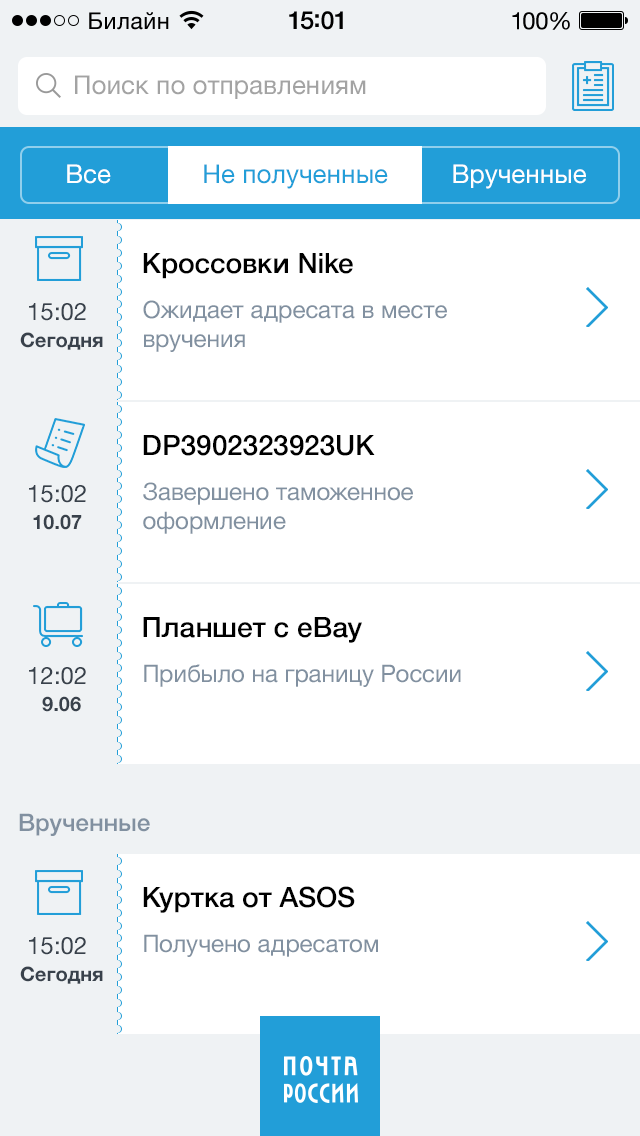
<style>
.page{position:relative;width:640px;height:1136px;background:#ffffff}
.page>*{position:absolute;margin:0}
.t1{font:26px "HelveticaNeue";color:#a3a3a3}
.t2{font:26px "HelveticaNeue";color:#ffffff}
.t3{font:26px "HelveticaNeue";color:#229ed8}
.t4{font:28px "HelveticaNeue-Medium";color:#000000}
.t5{font:24px "HelveticaNeue";color:#38414b}
.t6{font:24px "HelveticaNeue";color:#8190a0}
.t7{font:20px "HelveticaNeue-Bold";color:#38414b}
.t8{font:24px "HelveticaNeue-Medium";color:#8190a0}
</style>
<div class="page">
<p class="t1" style="left:75px;top:75px;width:291px;height:24px">Поиск по отправлениям</p>
<p class="t2" style="left:67px;top:164px;width:44px;height:20px">Все</p>
<p class="t3" style="left:204px;top:164px;width:184px;height:25px">Не полученные</p>
<p class="t2" style="left:453px;top:164px;width:133px;height:25px">Врученные</p>
<p class="t4" style="left:143px;top:253px;width:210px;height:26px">Кроссовки Nike</p>
<p class="t5" style="left:29px;top:303px;width:57px;height:18px">15:02</p>
<p class="t6" style="left:143px;top:300px;width:304px;height:52px">Ожидает адресата в месте <br>вручения</p>
<p class="t7" style="left:20px;top:332px;width:83px;height:18px">Сегодня</p>
<p class="t4" style="left:143px;top:435px;width:232px;height:21px">DP3902323923UK</p>
<p class="t5" style="left:29px;top:485px;width:57px;height:18px">15:02</p>
<p class="t6" style="left:143px;top:482px;width:270px;height:52px">Завершено таможенное <br>оформление</p>
<p class="t7" style="left:33px;top:514px;width:49px;height:16px">10.07</p>
<p class="t4" style="left:143px;top:617px;width:219px;height:26px">Планшет с eBay</p>
<p class="t6" style="left:144px;top:664px;width:317px;height:23px">Прибыло на границу России</p>
<p class="t5" style="left:29px;top:667px;width:57px;height:18px">12:02</p>
<p class="t7" style="left:42px;top:696px;width:39px;height:16px">9.06</p>
<p class="t8" style="left:19px;top:813px;width:131px;height:23px">Врученные</p>
<p class="t4" style="left:143px;top:886px;width:212px;height:27px">Куртка от ASOS</p>
<p class="t5" style="left:29px;top:937px;width:57px;height:18px">15:02</p>
<p class="t6" style="left:144px;top:934px;width:234px;height:23px">Получено адресатом</p>
<p class="t7" style="left:20px;top:966px;width:83px;height:18px">Сегодня</p>
</div>
